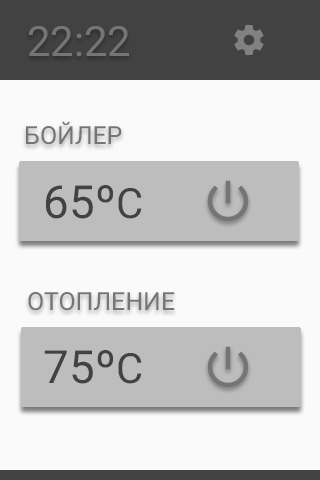
<style>
.page{position:relative;width:320px;height:480px;background:#fafafa}
.page>*{position:absolute;margin:0}
.t1{font:41.7px "Roboto-Regular";color:#757575}
.t2{font:25px "Roboto-Regular";color:#757575}
.t3{font:45.8px "Roboto-Regular";color:#424242}
.t4{font:41.7px "Roboto-Regular";color:#424242}
</style>
<div class="page">
<p class="t1" style="left:29px;top:26px;width:100px;height:31px">22:22</p>
<p class="t2" style="left:26px;top:121px;width:96px;height:24px">БОЙЛЕР</p>
<p class="t3" style="left:46px;top:185px;width:96px;height:34px">65º<span class="t4">C</span></p>
<p class="t2" style="left:28px;top:292px;width:147px;height:19px">ОТОПЛЕНИЕ</p>
<p class="t3" style="left:44px;top:350px;width:98px;height:34px">75º<span class="t4">C</span></p>
</div>
